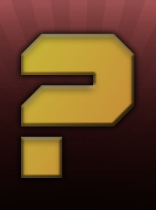
<style>
.page{position:relative;width:156px;height:210px}
.page>*{position:absolute;margin:0}
.t1{font:211.4px "ColdWarm"}
</style>
<div class="page">
<p class="t1" style="left:21px;top:33px;width:114px;height:145px">?</p>
</div>
